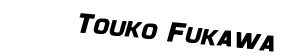
<style>
.page{position:relative;width:283px;height:56px;background:#ffffff}
.page>*{position:absolute;margin:0}
.t1{font:28px "Maximus";color:#000000;font-weight:bold;font-style:italic}
</style>
<div class="page">
<p class="t1" style="left:79px;top:13px;width:195px;height:39px;rotate:6deg">Touko Fukawa</p>
</div>
